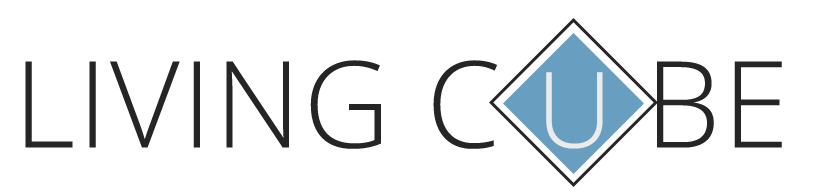
<style>
.page{position:relative;width:820px;height:193px;background:#ffffff}
.page>*{position:absolute;margin:0}
.t1{font:120px "OpenSans-Light";letter-spacing:0.02em;color:#252525}
.t2{font:105px "OpenSans-Light";letter-spacing:0.02em;color:#ebebeb}
</style>
<div class="page">
<p class="t1" style="left:25px;top:60px;width:757px;height:89px">LIVING C <span class="t2">U </span>BE</p>
</div>
